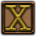
<style>
.page{position:relative;width:36px;height:36px}
.page>*{position:absolute;margin:0}
.t1{font:36.7px "Rockwell";scale:1.1 1}
</style>
<div class="page">
<p class="t1" style="left:5px;top:5px;width:26px;height:26px">X</p>
</div>
